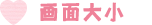
<style>
.page{position:relative;width:152px;height:25px;background:#ffffff}
.page>*{position:absolute;margin:0}
.t1{font:21.2px "shetumodengxiaofangti";color:#ef8299;font-weight:bold}
</style>
<div class="page">
<p class="t1" style="left:40px;top:2px;width:84px;height:20px">画面大小</p>
</div>
